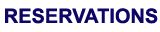
<style>
.page{position:relative;width:160px;height:32px;background:#ffffff}
.page>*{position:absolute;margin:0}
.t1{font:20px "Arial-BoldMT";color:#0d0664}
</style>
<div class="page">
<p class="t1" style="left:5px;top:8px;width:153px;height:16px">RESERVATIONS</p>
</div>
